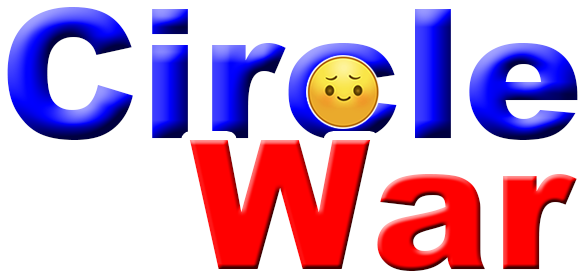
<style>
.page{position:relative;width:586px;height:280px;background:#ffffff}
.page>*{position:absolute;margin:0}
.t1{font:180px "Arial-Black";letter-spacing:0.005em}
.t2{font:180px "Arial-Black";letter-spacing:0.005em;color:#ff0000}
</style>
<div class="page">
<p class="t1" style="left:7px;top:7px;width:571px;height:133px">Circle</p>
<p class="t2" style="left:189px;top:140px;width:388px;height:131px">War</p>
</div>
